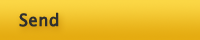
<style>
.page{position:relative;width:200px;height:40px}
.page>*{position:absolute;margin:0}
.t1{font:16.7px "LucidaGrande";color:#2f2f2f;font-weight:bold}
</style>
<div class="page">
<p class="t1" style="left:19px;top:12px;width:40px;height:15px">Send</p>
</div>
